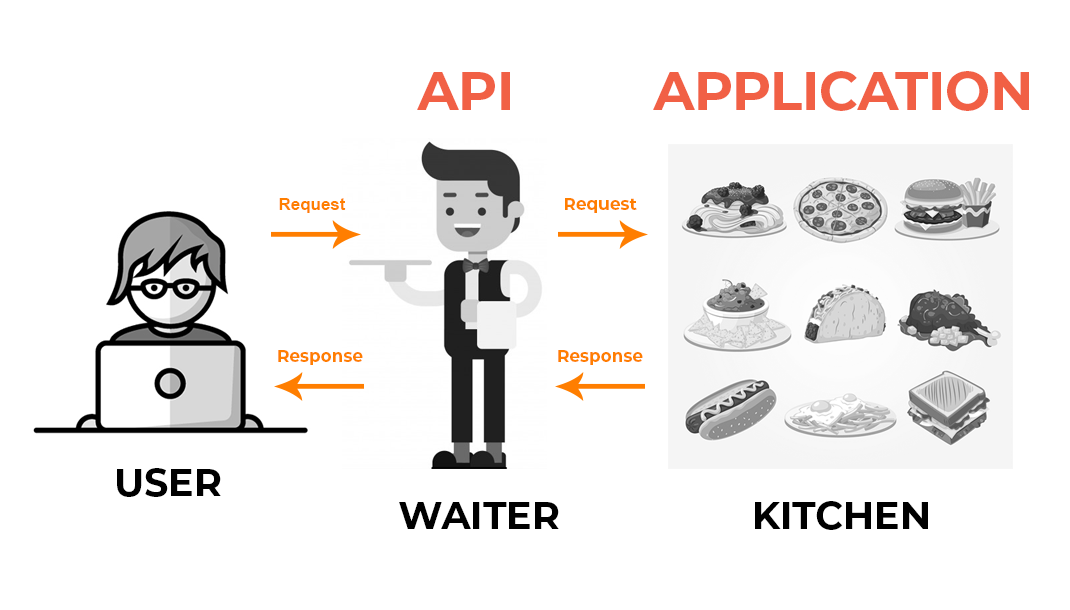
<style>
.page{position:relative;width:1070px;height:610px;background:#ffffff}
.page>*{position:absolute;margin:0}
.t1{font:53.6px "Montserrat-Bold";color:#f16045;text-transform:uppercase}
.t2{font:53.6px "Montserrat-Bold";letter-spacing:-0.01em;color:#f16045;text-transform:uppercase}
.t3{font:16.9px "Arial-BoldMT";color:#ff7e00}
.t4{font:16.9px "Montserrat-Bold";color:#ff7e00}
.t5{font:38.1px "Montserrat-Bold";color:#000000;text-transform:uppercase}
</style>
<div class="page">
<p class="t1" style="left:417px;top:72px;width:93px;height:38px">API</p>
<p class="t2" style="left:653px;top:71px;width:376px;height:40px">APplication</p>
<p class="t3" style="left:279px;top:198px;width:67px;height:15px">Request</p>
<p class="t4" style="left:565px;top:198px;width:72px;height:15px">Request</p>
<p class="t4" style="left:278px;top:350px;width:85px;height:15px">Response</p>
<p class="t4" style="left:558px;top:350px;width:85px;height:15px">Response</p>
<p class="t5" style="left:117px;top:468px;width:104px;height:29px">USER</p>
<p class="t5" style="left:399px;top:502px;width:160px;height:27px">WAITER</p>
<p class="t5" style="left:755px;top:501px;width:173px;height:29px">KITCHEN</p>
</div>
